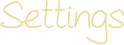
<style>
.page{position:relative;width:124px;height:45px;background:#ffffff}
.page>*{position:absolute;margin:0}
.t1{font:32px "AsCuteAs-Regular";color:#eed694}
</style>
<div class="page">
<p class="t1" style="left:0px;top:0px;width:124px;height:45px">Settings</p>
</div>
